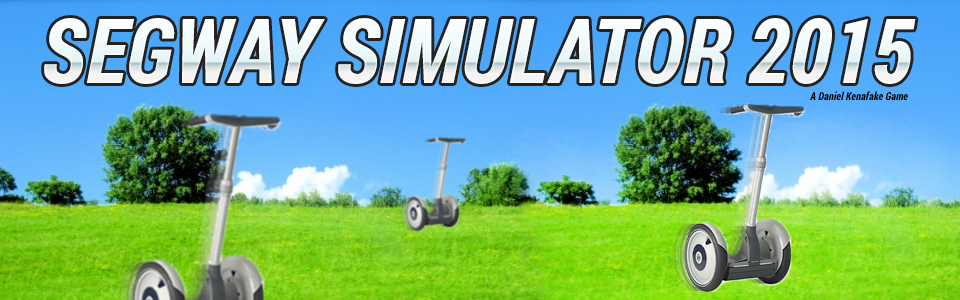
<style>
.page{position:relative;width:960px;height:300px}
.page>*{position:absolute;margin:0}
.t1{font:90px "RobotoCondensed-BoldItalic";color:#f4f9fb}
.t2{font:11.1px "RobotoCondensed-BoldItalic";color:#000000}
</style>
<div class="page">
<p class="t1" style="left:44px;top:18px;width:872px;height:66px">SEGWAY SIMULATOR 2015</p>
<p class="t2" style="left:810px;top:91px;width:98px;height:10px">A Daniel Kenafake Game</p>
</div>
